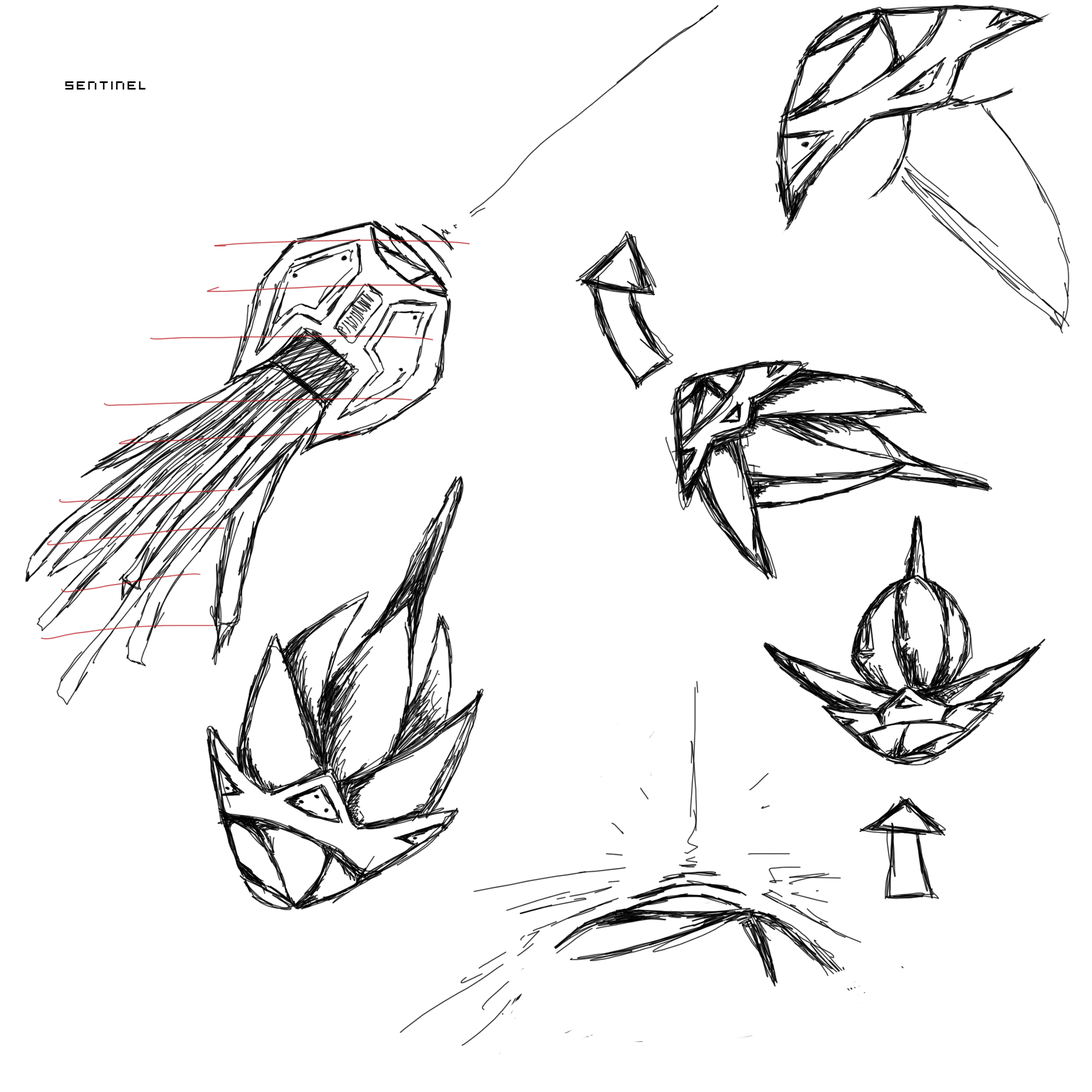
<style>
.page{position:relative;width:1092px;height:1092px;background:#ffffff}
.page>*{position:absolute;margin:0}
.t1{font:13.1px "VirtualDJ";color:#000000}
</style>
<div class="page">
<p class="t1" style="left:65px;top:81px;width:81px;height:9px">SEntinel</p>
</div>
